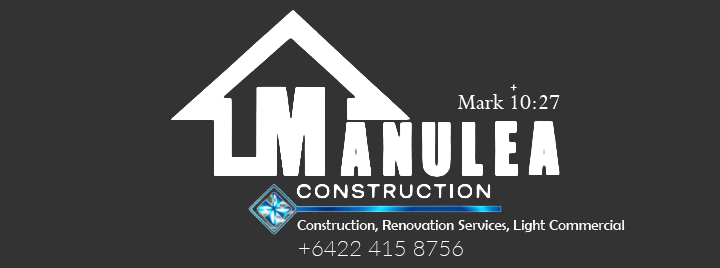
<style>
.page{position:relative;width:720px;height:268px;background:#333333}
.page>*{position:absolute;margin:0}
.t1{font:18px "CalifornianFB-Reg";color:#fdfdfd}
.t2{font:24px "Perpetua";color:#ffffff}
.t3{font:15.1px "BerlinSansFB-Reg";color:#ffffff}
.t4{font:22.1px "Lato-Thin";color:#ffffff}
</style>
<div class="page">
<p class="t1" style="left:510px;top:84px;width:7px;height:7px">+</p>
<p class="t2" style="left:458px;top:94px;width:102px;height:15px">Mark 10:27</p>
<p class="t3" style="left:297px;top:220px;width:328px;height:13px">Construction, Renovation Services, Light Commercial</p>
<p class="t4" style="left:299px;top:241px;width:164px;height:15px">+6422 415 8756</p>
</div>
